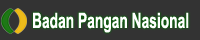
<style>
.page{position:relative;width:200px;height:40px;background:#333333}
.page>*{position:absolute;margin:0}
.t1{font:21.2px "Arial-BoldMT";color:#ffffff;scale:0.65 1}
</style>
<div class="page">
<p class="t1" style="left:33px;top:12px;width:156px;height:21px">Badan Pangan Nasional</p>
</div>
